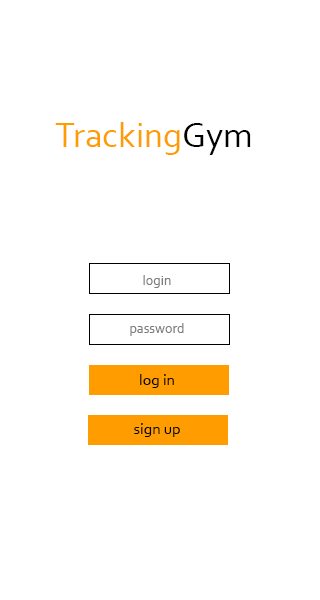
<style>
.page{position:relative;width:320px;height:600px;background:#ffffff}
.page>*{position:absolute;margin:0}
.t1{font:36px "Corbel";color:#ff9c00}
.t2{font:36px "Corbel";color:#000000}
.t3{font:14px "Corbel";color:#7b7b7b}
.t4{font:16px "Corbel";color:#000000}
</style>
<div class="page">
<p class="t1" style="left:55px;top:122px;width:196px;height:33px">Tracking<span class="t2">Gym</span></p>
<p class="t3" style="left:143px;top:275px;width:28px;height:13px">login</p>
<p class="t3" style="left:130px;top:323px;width:54px;height:13px">password</p>
<p class="t4" style="left:140px;top:374px;width:34px;height:14px">log in</p>
<p class="t4" style="left:134px;top:423px;width:46px;height:14px">sign up</p>
</div>
